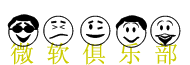
<style>
.page{position:relative;width:190px;height:65px;background:#ffffff}
.page>*{position:absolute;margin:0}
.t1{font:30px "Expressions-JL-Regular";color:#000000}
.t2{font:24px "SimSun";color:#cccc00}
</style>
<div class="page">
<p class="t1" style="left:7px;top:14px;width:32px;height:33px">y</p>
<p class="t1" style="left:43px;top:15px;width:31px;height:31px">i</p>
<p class="t1" style="left:80px;top:15px;width:31px;height:31px">e</p>
<p class="t1" style="left:115px;top:15px;width:32px;height:33px">v</p>
<p class="t1" style="left:150px;top:15px;width:31px;height:32px">u</p>
<p class="t2" style="left:10px;top:42px;width:167px;height:23px">微 软 俱 乐 部</p>
</div>
